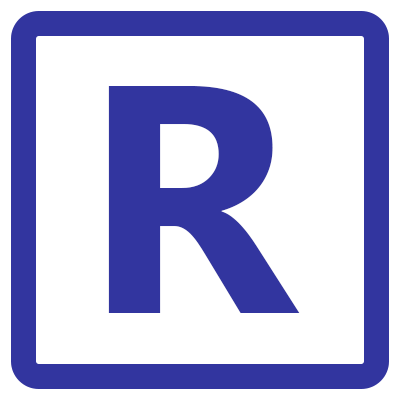
<style>
.page{position:relative;width:400px;height:400px;background:#ffffff}
.page>*{position:absolute;margin:0}
.t1{font:324.1px "SegoeUI-Bold";color:#32359f}
</style>
<div class="page">
<p class="t1" style="left:108px;top:86px;width:192px;height:227px">R</p>
</div>
